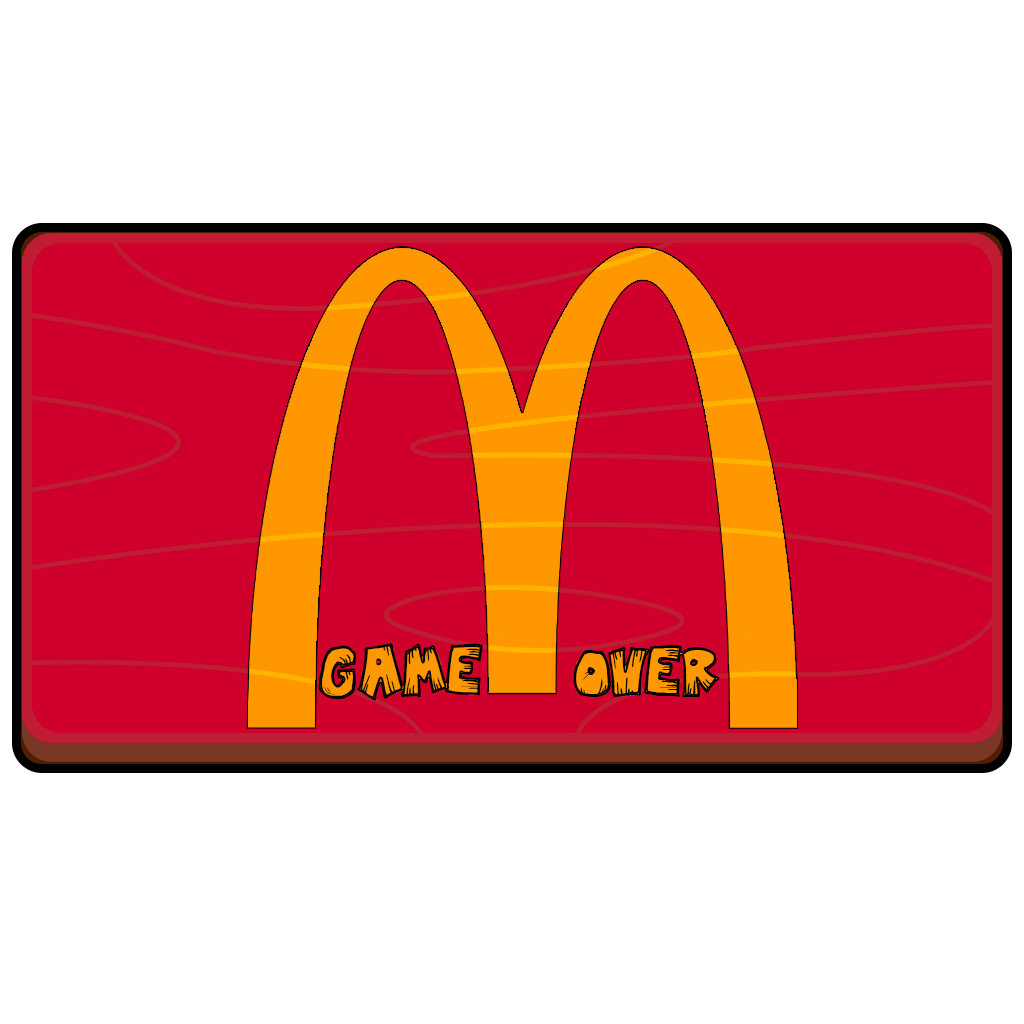
<style>
.page{position:relative;width:1024px;height:1024px;background:#ffffff}
.page>*{position:absolute;margin:0}
.t1{font:64px "MisterVampire";letter-spacing:-0.1em;color:#000000}
</style>
<div class="page">
<p class="t1" style="left:318px;top:643px;width:165px;height:58px">GAME</p>
<p class="t1" style="left:573px;top:645px;width:147px;height:52px">OVER</p>
</div>
